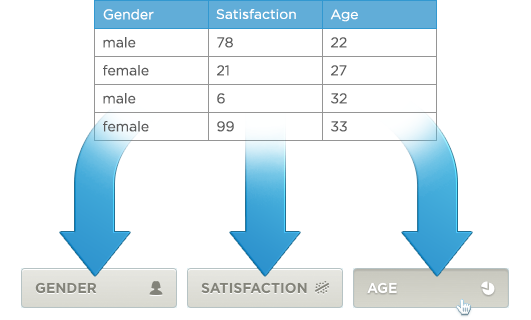
<style>
.page{position:relative;width:531px;height:320px;background:#ffffff}
.page>*{position:absolute;margin:0}
.t1{font:13.9px "Gotham-Book";color:#ffffff}
.t2{font:13.4px "Gotham-Book";color:#ffffff;scale:1.04 1}
.t3{font:14px "Gotham-Book";color:#5b5b5b}
</style>
<div class="page">
<p class="t1" style="left:103px;top:9px;width:51px;height:11px">Gender</p>
<p class="t2" style="left:216px;top:9px;width:80px;height:10px">Satisfaction</p>
<p class="t2" style="left:330px;top:9px;width:28px;height:13px">Age</p>
<p class="t3" style="left:103px;top:37px;width:33px;height:11px">male</p>
<p class="t3" style="left:217px;top:37px;width:16px;height:11px">78</p>
<p class="t3" style="left:331px;top:37px;width:16px;height:11px">22</p>
<p class="t3" style="left:103px;top:65px;width:46px;height:11px">female</p>
<p class="t3" style="left:217px;top:65px;width:12px;height:11px">21</p>
<p class="t3" style="left:331px;top:65px;width:16px;height:11px">27</p>
<p class="t3" style="left:103px;top:93px;width:33px;height:11px">male</p>
<p class="t3" style="left:217px;top:93px;width:8px;height:11px">6</p>
<p class="t3" style="left:331px;top:93px;width:16px;height:11px">32</p>
<p class="t3" style="left:103px;top:121px;width:46px;height:11px">female</p>
<p class="t3" style="left:217px;top:121px;width:17px;height:11px">99</p>
<p class="t3" style="left:331px;top:121px;width:16px;height:11px">33</p>
</div>
